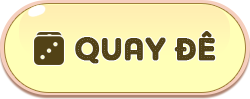
<style>
.page{position:relative;width:250px;height:99px;background:#ffffb7}
.page>*{position:absolute;margin:0}
.t1{font:32px "SVN-AdamGorry";color:#524216;font-weight:bold}
</style>
<div class="page">
<p class="t1" style="left:75px;top:31px;width:141px;height:33px">Quay ĐÊ</p>
</div>
